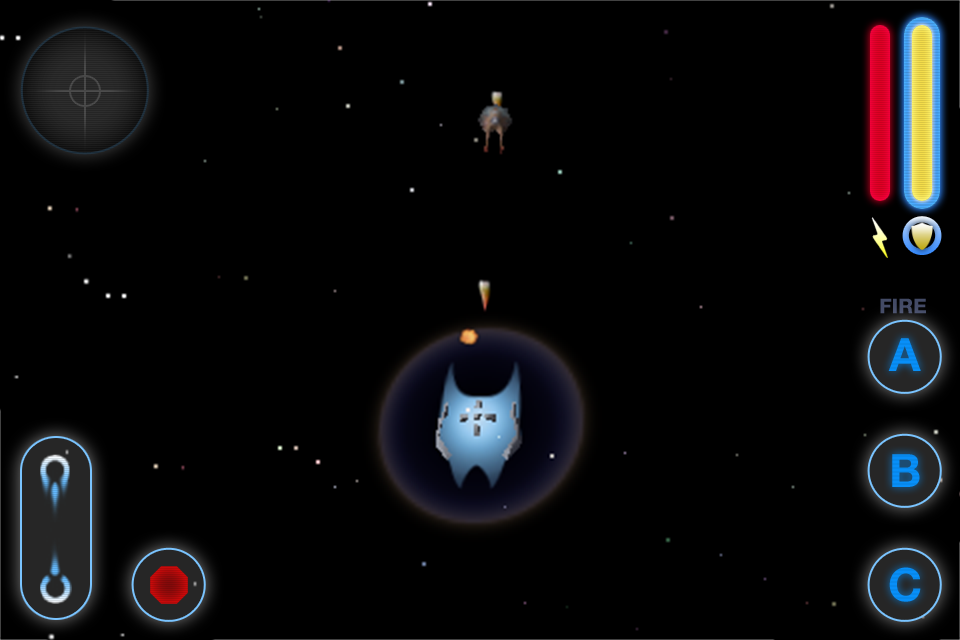
<style>
.page{position:relative;width:960px;height:640px;background:#000000}
.page>*{position:absolute;margin:0}
.t1{font:20px "HelveticaNeue-Bold";color:#444b66;font-weight:bold}
.t2{font:46px "HelveticaNeue-Bold";color:#0893ff}
</style>
<div class="page">
<p class="t1" style="left:880px;top:298px;width:46px;height:16px">FIRE</p>
<p class="t2" style="left:888px;top:338px;width:33px;height:33px">A</p>
<p class="t2" style="left:892px;top:454px;width:28px;height:33px">B</p>
<p class="t2" style="left:889px;top:567px;width:32px;height:35px">C</p>
</div>
